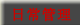
<style>
.page{position:relative;width:80px;height:25px;background:#464646}
.page>*{position:absolute;margin:0}
.t1{font:14px "NSimSun";letter-spacing:0.1em;color:#c90300;font-weight:bold}
</style>
<div class="page">
<p class="t1" style="left:13px;top:7px;width:59px;height:15px">日常管理</p>
</div>
